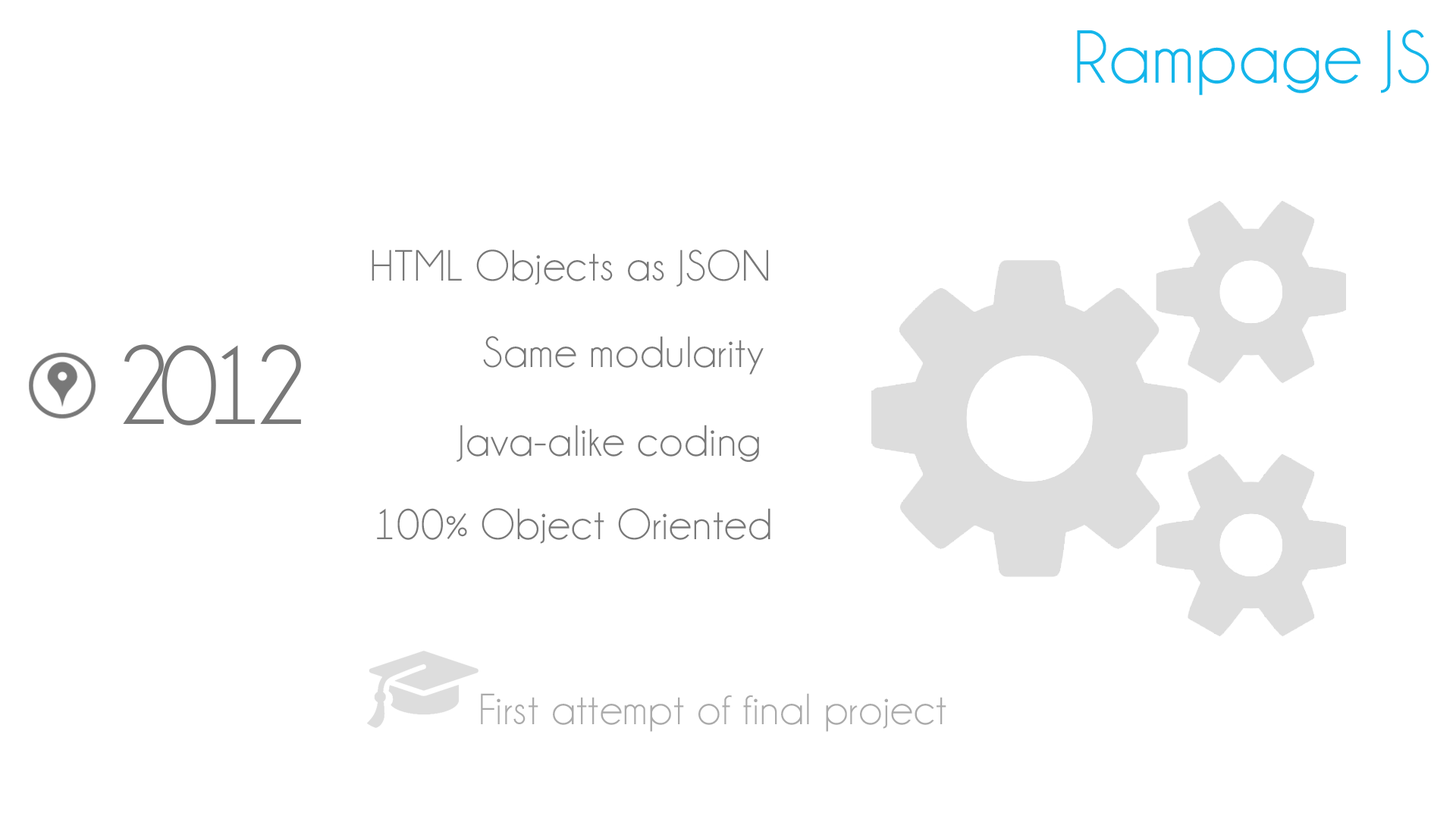
<style>
.page{position:relative;width:1456px;height:819px;background:#ffffff}
.page>*{position:absolute;margin:0}
.t1{font:75.8px "Champagne&Limousines";letter-spacing:0.02em;color:#14b5ea}
.t2{font:44.2px "Champagne&Limousines";letter-spacing:0.02em;color:#787878}
.t3{font:113.7px "Champagne&Limousines";letter-spacing:-0.12em;color:#787878}
.t4{font:44.2px "Champagne&Limousines";letter-spacing:0.02em;color:#aaaaaa}
</style>
<div class="page">
<p class="t1" style="left:1077px;top:30px;width:352px;height:66px">Rampage JS</p>
<p class="t2" style="left:372px;top:249px;width:396px;height:38px">HTML Objects as JSON</p>
<p class="t2" style="left:483px;top:336px;width:281px;height:39px">Same modularity</p>
<p class="t3" style="left:123px;top:344px;width:178px;height:81px">2012</p>
<p class="t2" style="left:457px;top:425px;width:302px;height:37px">Java-alike coding</p>
<p class="t2" style="left:377px;top:508px;width:393px;height:36px">100% Object Oriented</p>
<p class="t4" style="left:481px;top:693px;width:465px;height:39px">First attempt of final project</p>
</div>
